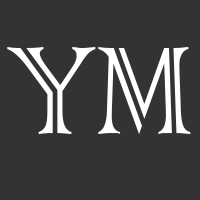
<style>
.page{position:relative;width:200px;height:200px;background:#333333}
.page>*{position:absolute;margin:0}
.t1{font:164.8px "ColonnaMT";color:#ffffff;scale:0.77 1}
</style>
<div class="page">
<p class="t1" style="left:7px;top:47px;width:184px;height:87px">YM</p>
</div>
